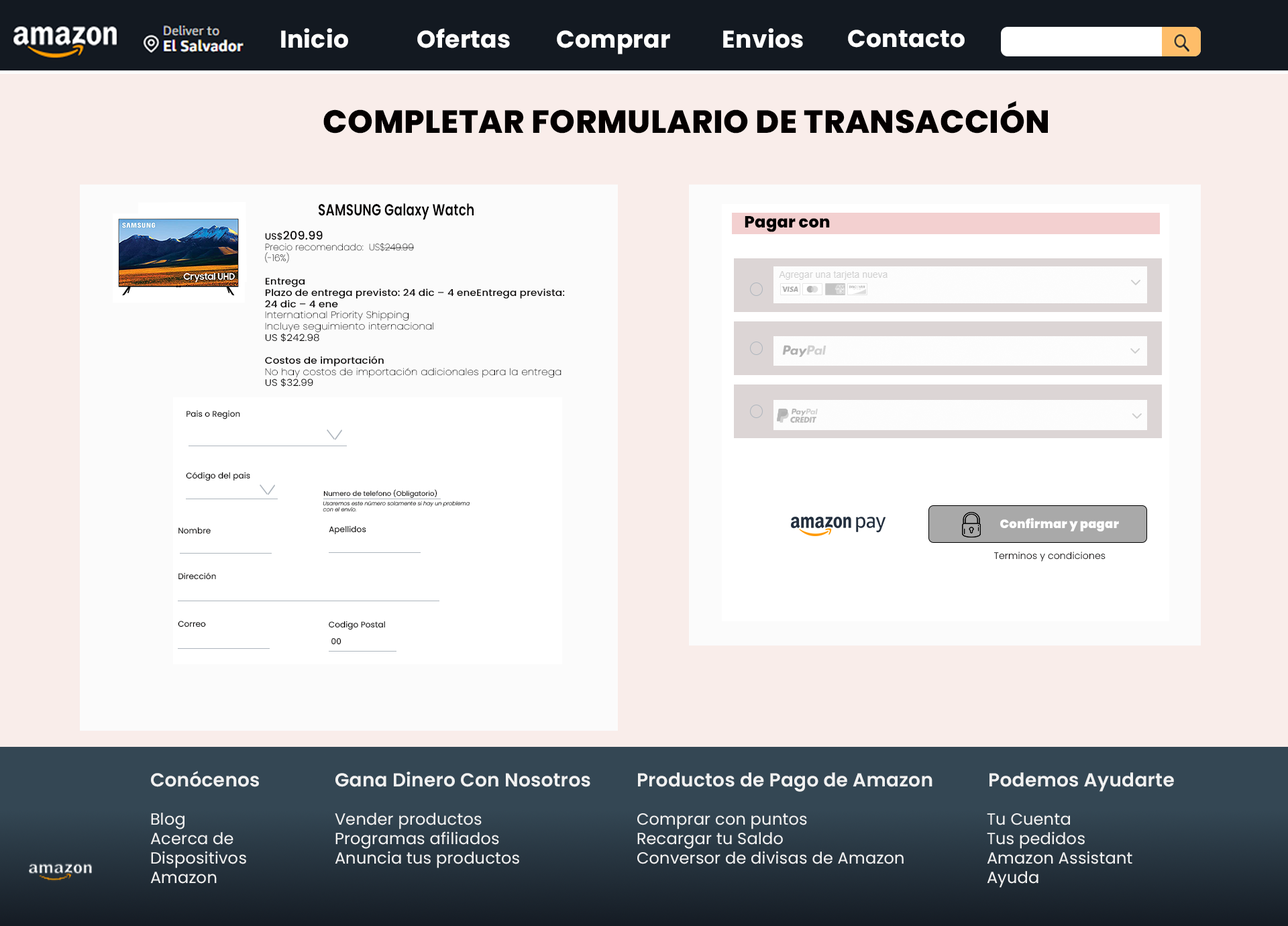
<style>
.page{position:relative;width:1288px;height:926px;background:#f9edea}
.page>*{position:absolute;margin:0}
.t1{font:24.1px "Poppins-Bold";letter-spacing:0.01em;color:#ffffff}
.t2{font:32.2px "Poppins-ExtraBold";letter-spacing:0.01em;color:#040000}
.t3{font:16.1px "Poppins-SemiBold";letter-spacing:0.01em;color:#040000;scale:0.77 1}
.t4{font:16.1px "Poppins-ExtraBold";letter-spacing:0.01em;color:#000000}
.t5{font:9.1px "Poppins-Thin";letter-spacing:0.01em;color:#040000}
.t6{font:9.1px "Poppins-Medium";letter-spacing:0.01em;color:#040000}
.t7{font:11.6px "Poppins-Medium";letter-spacing:0.01em;color:#040000}
.t8{font:9.4px "Poppins-Medium";letter-spacing:0.01em;color:#040000;scale:1.09 1}
.t9{font:9.4px "Poppins-Thin";letter-spacing:0.01em;color:#040000;scale:1.09 1}
.t10{font:9.4px "Poppins-Light";letter-spacing:0.01em;color:#040000;scale:1.09 1}
.t11{font:8.1px "Poppins-Regular";letter-spacing:0.01em;color:#040000}
.t12{font:6.7px "Poppins-Regular";letter-spacing:0.01em;color:#040000}
.t13{font:5.4px "Poppins-ExtraLightItalic";letter-spacing:0.01em;color:#040000}
.t14{font:12.1px "Poppins-Black";letter-spacing:0.01em;color:#fefefe}
.t15{font:9.4px "Poppins-Light";letter-spacing:0.01em;color:#080000}
.t16{font:16.1px "Poppins-Regular";letter-spacing:0.01em;color:#f1f1f1}
.t17{font:18.8px "Poppins-SemiBold";letter-spacing:0.01em;color:#f1f1f1}
</style>
<div class="page">
<p class="t1" style="left:281px;top:28px;width:67px;height:20px">Inicio</p>
<p class="t1" style="left:417px;top:28px;width:93px;height:20px">Ofertas</p>
<p class="t1" style="left:723px;top:28px;width:80px;height:20px">Envios</p>
<p class="t1" style="left:848px;top:30px;width:117px;height:18px">Contacto</p>
<p class="t1" style="left:557px;top:30px;width:113px;height:24px">Comprar</p>
<p class="t2" style="left:323px;top:101px;width:725px;height:32px">COMPLETAR FORMULARIO DE TRANSACCIÓN</p>
<p class="t3" style="left:319px;top:203px;width:155px;height:17px">SAMSUNG Galaxy Watch</p>
<p class="t4" style="left:745px;top:216px;width:85px;height:16px">Pagar con</p>
<p class="t5" style="left:265px;top:231px;width:150px;height:32px"><span class="t6">US$</span><span class="t7">209.99 <br></span>Precio recomendado:  US$249.99  (-16%)</p>
<p class="t8" style="left:265px;top:278px;width:300px;height:109px">Entrega<br>Plazo de entrega previsto: 24 dic – 4 eneEntrega prevista: 24 dic – 4 ene<br><span class="t9">International Priority Shipping<br>Incluye seguimiento internacional<br></span><span class="t10">US $242.98<br></span><br>Costos de importación<br><span class="t9">No hay costos de importación adicionales para la entrega<br></span><span class="t10">US $32.99</span></p>
<p class="t11" style="left:186px;top:410px;width:54px;height:9px">Pais o Region</p>
<p class="t11" style="left:186px;top:472px;width:64px;height:9px">Código del pais</p>
<p class="t12" style="left:323px;top:489px;width:114px;height:9px">Numero de telefono (Obligatorio)</p>
<p class="t13" style="left:323px;top:500px;width:147px;height:12px">Usaremos este número solamente si hay un problema con el envío.</p>
<p class="t14" style="left:1000px;top:518px;width:119px;height:13px">Confirmar y pagar</p>
<p class="t11" style="left:178px;top:527px;width:33px;height:7px">Nombre</p>
<p class="t11" style="left:329px;top:525px;width:37px;height:10px">Apellidos</p>
<p class="t15" style="left:994px;top:551px;width:112px;height:11px">Terminos y condiciones</p>
<p class="t11" style="left:178px;top:572px;width:38px;height:8px">Dirección</p>
<p class="t11" style="left:178px;top:621px;width:28px;height:6px">Correo</p>
<p class="t11" style="left:329px;top:621px;width:56px;height:9px">Codigo Postal</p>
<p class="t11" style="left:331px;top:638px;width:10px;height:7px">00</p>
<p class="t16" style="left:150px;top:771px;width:109px;height:113px"><span class="t17">Conócenos<br><br></span>Blog<br>Acerca de<br>Dispositivos      Amazon</p>
<p class="t16" style="left:335px;top:771px;width:255px;height:97px"><span class="t17">Gana Dinero Con Nosotros<br><br></span>Vender productos<br>Programas afiliados<br>Anuncia tus productos</p>
<p class="t16" style="left:637px;top:772px;width:295px;height:92px"><span class="t17">Productos de Pago de Amazon<br><br></span>Comprar con puntos<br>Recargar tu Saldo<br>Conversor de divisas de Amazon</p>
<p class="t16" style="left:987px;top:772px;width:187px;height:116px;text-align:center"><span class="t17">Podemos Ayudarte<br></span><br>Tu Cuenta<br>Tus pedidos<br>Amazon Assistant<br>Ayuda</p>
</div>
